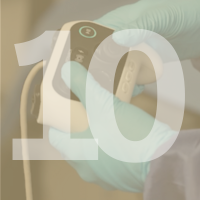
<style>
.page{position:relative;width:200px;height:200px}
.page>*{position:absolute;margin:0}
.t1{font:187.5px "PostGrotesk-Bold"}
.t2{font:187.5px "PostGrotesk-Bold";color:#d0cfc6}
</style>
<div class="page">
<p class="t1" style="left:12px;top:30px;width:87px;height:130px">1</p>
<p class="t2" style="left:85px;top:28px;width:100px;height:135px">0</p>
</div>
